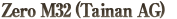
<style>
.page{position:relative;width:177px;height:19px;background:#ffffff}
.page>*{position:absolute;margin:0}
.t1{font:18px "RyuminPro-ExBold";letter-spacing:-0.06em;color:#4a3f32;font-weight:bold;scale:0.9 1}
</style>
<div class="page">
<p class="t1" style="left:1px;top:1px;width:164px;height:18px">Zero M32 (Tainan AG)</p>
</div>
